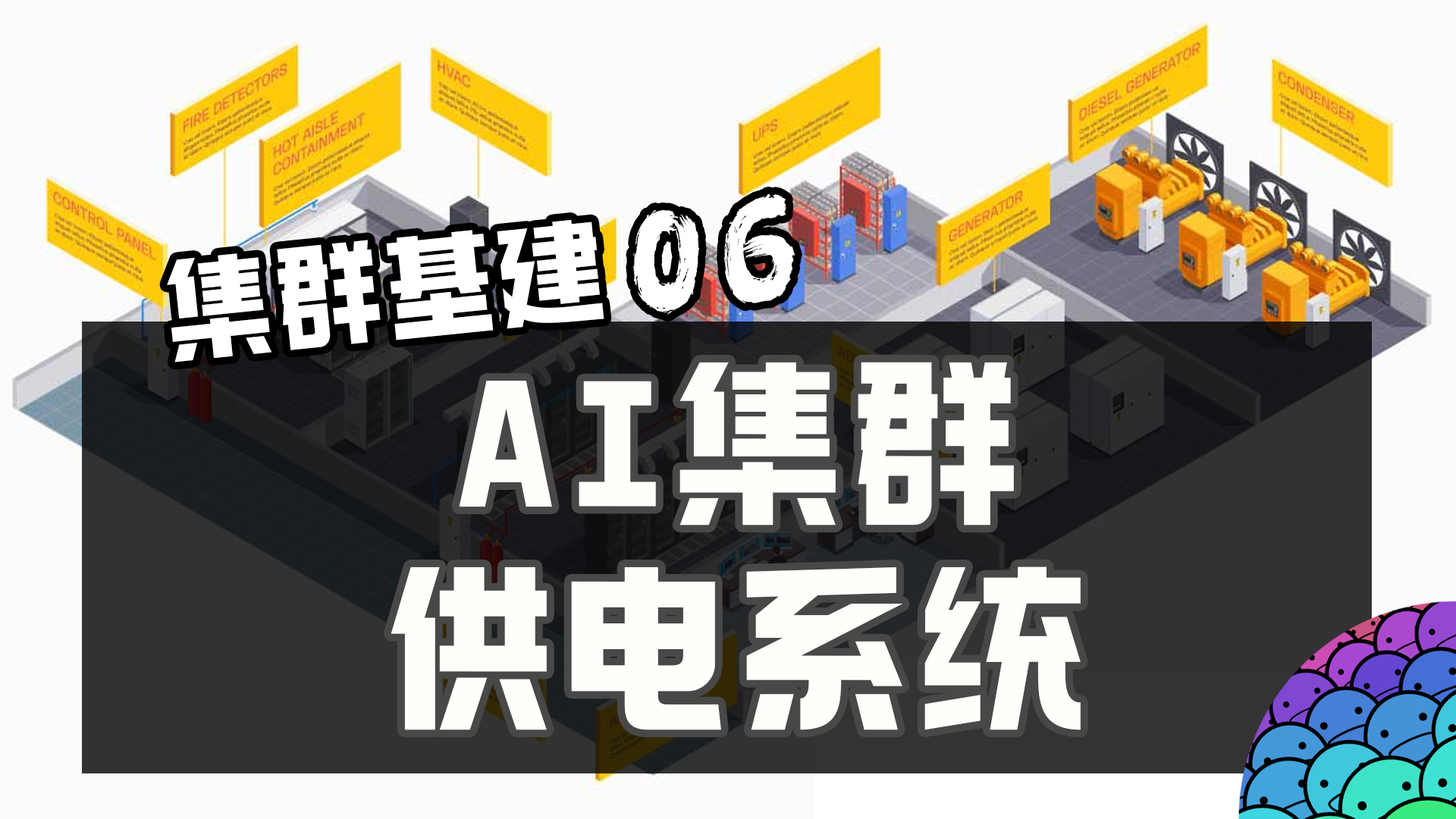
<style>
.page{position:relative;width:1456px;height:819px;background:#fbfbfb}
.page>*{position:absolute;margin:0}
.t1{font:136.5px "REEJI-CHAO-BeiMingGBT-Flash";letter-spacing:0.05em;color:#ffffff}
.t2{font:113.7px "098-";letter-spacing:0.05em;color:#ffffff}
.t3{font:182px/204.7px "098-";letter-spacing:0.05em;color:#fefffa}
</style>
<div class="page">
<p class="t1" style="left:633px;top:194px;width:162px;height:121px;rotate:-7deg">06</p>
<p class="t2" style="left:167px;top:220px;width:437px;height:142px;rotate:-6deg">集群基建</p>
<p class="t3" style="left:391px;top:362px;width:690px;height:368px;text-align:center">AI集群<br>供电系统</p>
</div>
